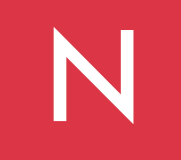
<style>
.page{position:relative;width:181px;height:160px;background:#dc3545}
.page>*{position:absolute;margin:0}
.t1{font:145.8px "TwCenMT-Regular";color:#ffffff}
</style>
<div class="page">
<p class="t1" style="left:53px;top:27px;width:81px;height:97px">N</p>
</div>
